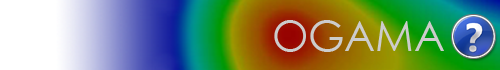
<style>
.page{position:relative;width:500px;height:70px}
.page>*{position:absolute;margin:0}
.t1{font:41.7px "CenturyGothic";color:#cccccc}
</style>
<div class="page">
<p class="t1" style="left:274px;top:20px;width:170px;height:32px">OGAMA</p>
</div>
